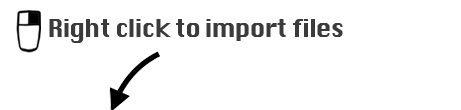
<style>
.page{position:relative;width:461px;height:110px;background:#ffffff}
.page>*{position:absolute;margin:0}
.t1{font:24.3px "Silom";letter-spacing:-0.05em;color:#3b3b3b}
</style>
<div class="page">
<p class="t1" style="left:49px;top:19px;width:294px;height:24px">Right click to import files</p>
</div>
